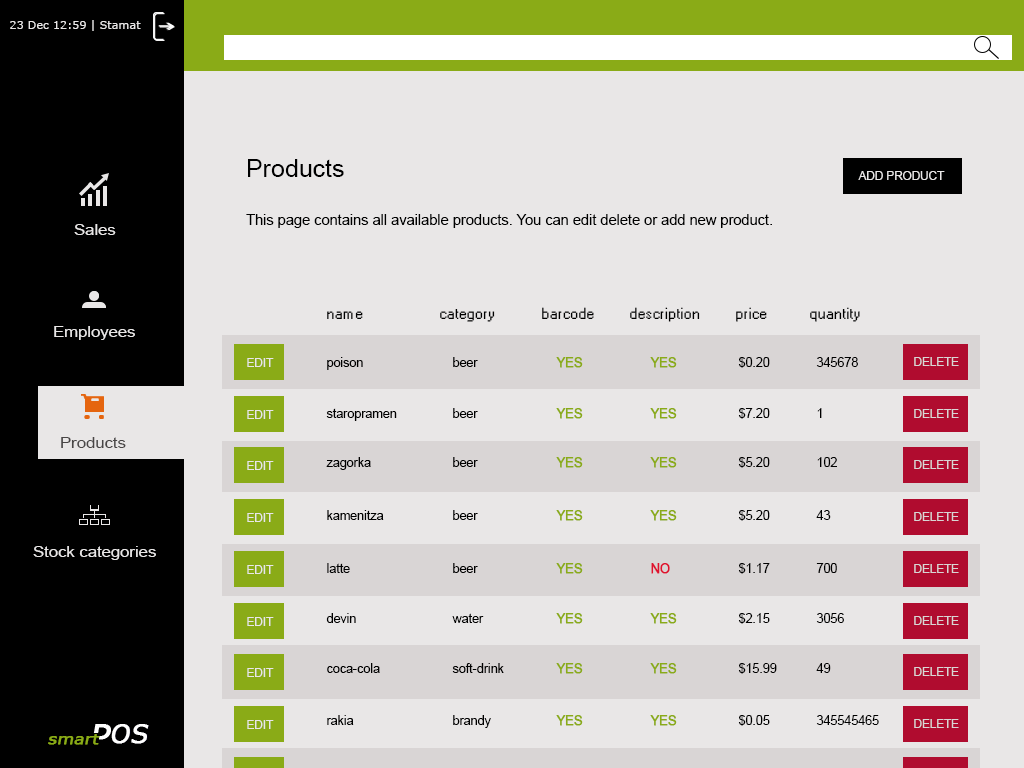
<style>
.page{position:relative;width:1024px;height:768px;background:#e9e7e7}
.page>*{position:absolute;margin:0}
.t1{font:11.2px "Verdana";color:#e9e7e7}
.t2{font:14.6px "ArialMT";color:#000000}
.t3{font:25px "ArialMT";color:#000000}
.t4{font:11.7px "ArialMT";color:#e9e7e7}
.t5{font:15px "ArialMT";color:#e9e7e7;scale:1.11 1}
.t6{font:14.6px "MS Sans Serif";color:#000000}
.t7{font:12.5px "ArialMT";color:#000000}
.t8{font:12.5px "ArialMT";color:#8aab17;font-weight:bold}
.t9{font:11.7px "ArialMT";color:#d9d5d5}
.t10{font:15px "ArialMT";color:#494646;scale:1.11 1}
.t11{font:12.5px "ArialMT";color:#df112e;font-weight:bold}
.t12{font:25px "Verdana";color:#ffffff;font-weight:bold;font-style:italic}
.t13{font:15px "Verdana";color:#8aab17;font-weight:bold;font-style:italic;scale:1.11 1}
</style>
<div class="page">
<p class="t1" style="left:10px;top:20px;width:131px;height:11px">23 Dec 12:59 | Stamat</p>
<p class="t2" style="left:246px;top:159px;width:526px;height:69px"><span class="t3">Products<br><br></span>This page contains all available products. You can edit delete or add new product.</p>
<p class="t4" style="left:858px;top:171px;width:87px;height:9px">ADD PRODUCT</p>
<p class="t5" style="left:74px;top:224px;width:42px;height:11px">Sales</p>
<p class="t6" style="left:327px;top:311px;width:36px;height:8px">name</p>
<p class="t6" style="left:440px;top:309px;width:55px;height:13px">category</p>
<p class="t6" style="left:542px;top:307px;width:52px;height:12px">barcode</p>
<p class="t6" style="left:630px;top:307px;width:70px;height:15px">description</p>
<p class="t6" style="left:736px;top:307px;width:31px;height:15px">price</p>
<p class="t6" style="left:810px;top:307px;width:50px;height:15px">quantity</p>
<p class="t5" style="left:54px;top:326px;width:81px;height:14px">Employees</p>
<p class="t4" style="left:247px;top:358px;width:27px;height:9px">EDIT</p>
<p class="t7" style="left:327px;top:357px;width:36px;height:13px">poison</p>
<p class="t7" style="left:327px;top:357px;width:36px;height:13px">poison</p>
<p class="t7" style="left:453px;top:357px;width:25px;height:10px">beer</p>
<p class="t7" style="left:453px;top:357px;width:25px;height:10px">beer</p>
<p class="t8" style="left:556px;top:357px;width:27px;height:11px">YES</p>
<p class="t8" style="left:556px;top:357px;width:27px;height:11px">YES</p>
<p class="t8" style="left:650px;top:357px;width:27px;height:11px">YES</p>
<p class="t8" style="left:650px;top:357px;width:27px;height:11px">YES</p>
<p class="t7" style="left:738px;top:357px;width:32px;height:11px">$0.20</p>
<p class="t7" style="left:738px;top:357px;width:32px;height:11px">$0.20</p>
<p class="t7" style="left:816px;top:357px;width:42px;height:10px">345678</p>
<p class="t7" style="left:816px;top:357px;width:42px;height:10px">345678</p>
<p class="t9" style="left:914px;top:357px;width:45px;height:9px">DELETE</p>
<p class="t4" style="left:247px;top:410px;width:27px;height:9px">EDIT</p>
<p class="t7" style="left:326px;top:408px;width:71px;height:13px">staropramen</p>
<p class="t7" style="left:453px;top:408px;width:25px;height:10px">beer</p>
<p class="t8" style="left:556px;top:408px;width:27px;height:11px">YES</p>
<p class="t8" style="left:650px;top:408px;width:27px;height:11px">YES</p>
<p class="t7" style="left:738px;top:408px;width:32px;height:11px">$7.20</p>
<p class="t7" style="left:817px;top:408px;width:5px;height:10px">1</p>
<p class="t9" style="left:914px;top:409px;width:45px;height:9px">DELETE</p>
<p class="t10" style="left:61px;top:437px;width:65px;height:11px">Products</p>
<p class="t4" style="left:247px;top:461px;width:27px;height:9px">EDIT</p>
<p class="t7" style="left:326px;top:457px;width:45px;height:13px">zagorka</p>
<p class="t7" style="left:453px;top:457px;width:25px;height:10px">beer</p>
<p class="t8" style="left:556px;top:457px;width:27px;height:11px">YES</p>
<p class="t8" style="left:650px;top:457px;width:27px;height:11px">YES</p>
<p class="t7" style="left:738px;top:457px;width:32px;height:11px">$5.20</p>
<p class="t7" style="left:817px;top:457px;width:20px;height:10px">102</p>
<p class="t9" style="left:914px;top:460px;width:45px;height:9px">DELETE</p>
<p class="t7" style="left:327px;top:510px;width:57px;height:10px">kamenitza</p>
<p class="t7" style="left:453px;top:510px;width:25px;height:10px">beer</p>
<p class="t8" style="left:556px;top:510px;width:27px;height:11px">YES</p>
<p class="t8" style="left:650px;top:510px;width:27px;height:11px">YES</p>
<p class="t7" style="left:738px;top:510px;width:32px;height:11px">$5.20</p>
<p class="t7" style="left:816px;top:510px;width:15px;height:10px">43</p>
<p class="t4" style="left:247px;top:513px;width:27px;height:9px">EDIT</p>
<p class="t9" style="left:914px;top:512px;width:45px;height:9px">DELETE</p>
<p class="t5" style="left:33px;top:546px;width:123px;height:14px">Stock categories</p>
<p class="t4" style="left:247px;top:565px;width:27px;height:9px">EDIT</p>
<p class="t7" style="left:327px;top:563px;width:23px;height:10px">latte</p>
<p class="t7" style="left:453px;top:563px;width:25px;height:10px">beer</p>
<p class="t8" style="left:556px;top:563px;width:27px;height:11px">YES</p>
<p class="t11" style="left:651px;top:563px;width:19px;height:11px">NO</p>
<p class="t7" style="left:738px;top:563px;width:32px;height:11px">$1.17</p>
<p class="t7" style="left:816px;top:563px;width:21px;height:10px">700</p>
<p class="t9" style="left:914px;top:564px;width:45px;height:9px">DELETE</p>
<p class="t4" style="left:247px;top:617px;width:27px;height:9px">EDIT</p>
<p class="t7" style="left:326px;top:613px;width:30px;height:10px">devin</p>
<p class="t7" style="left:452px;top:613px;width:32px;height:10px">water</p>
<p class="t8" style="left:556px;top:613px;width:27px;height:11px">YES</p>
<p class="t8" style="left:650px;top:613px;width:27px;height:11px">YES</p>
<p class="t7" style="left:738px;top:613px;width:32px;height:11px">$2.15</p>
<p class="t7" style="left:816px;top:613px;width:28px;height:10px">3056</p>
<p class="t9" style="left:914px;top:616px;width:45px;height:9px">DELETE</p>
<p class="t7" style="left:327px;top:663px;width:53px;height:10px">coca-cola</p>
<p class="t7" style="left:452px;top:663px;width:52px;height:10px">soft-drink</p>
<p class="t8" style="left:556px;top:663px;width:27px;height:11px">YES</p>
<p class="t8" style="left:650px;top:663px;width:27px;height:11px">YES</p>
<p class="t7" style="left:738px;top:663px;width:39px;height:11px">$15.99</p>
<p class="t7" style="left:816px;top:663px;width:15px;height:10px">49</p>
<p class="t4" style="left:247px;top:668px;width:27px;height:9px">EDIT</p>
<p class="t9" style="left:914px;top:667px;width:45px;height:9px">DELETE</p>
<p class="t12" style="left:111px;top:724px;width:38px;height:20px">OS</p>
<p class="t12" style="left:112px;top:724px;width:38px;height:20px">OS</p>
<p class="t4" style="left:247px;top:720px;width:27px;height:9px">EDIT</p>
<p class="t7" style="left:327px;top:715px;width:27px;height:10px">rakia</p>
<p class="t7" style="left:453px;top:715px;width:38px;height:13px">brandy</p>
<p class="t8" style="left:556px;top:715px;width:27px;height:11px">YES</p>
<p class="t8" style="left:650px;top:715px;width:27px;height:11px">YES</p>
<p class="t7" style="left:738px;top:715px;width:32px;height:11px">$0.05</p>
<p class="t7" style="left:816px;top:715px;width:63px;height:10px">345545465</p>
<p class="t9" style="left:914px;top:719px;width:45px;height:9px">DELETE</p>
<p class="t13" style="left:48px;top:734px;width:52px;height:11px">smart</p>
</div>
